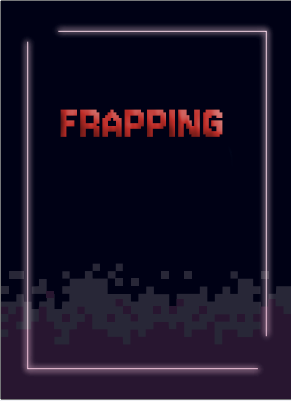
<style>
.page{position:relative;width:291px;height:401px;background:#000115}
.page>*{position:absolute;margin:0}
.t1{font:50px "Jersey10-Regular";letter-spacing:0.025em}
</style>
<div class="page">
<p class="t1" style="left:60px;top:109px;width:163px;height:28px">FRAPPING</p>
</div>
